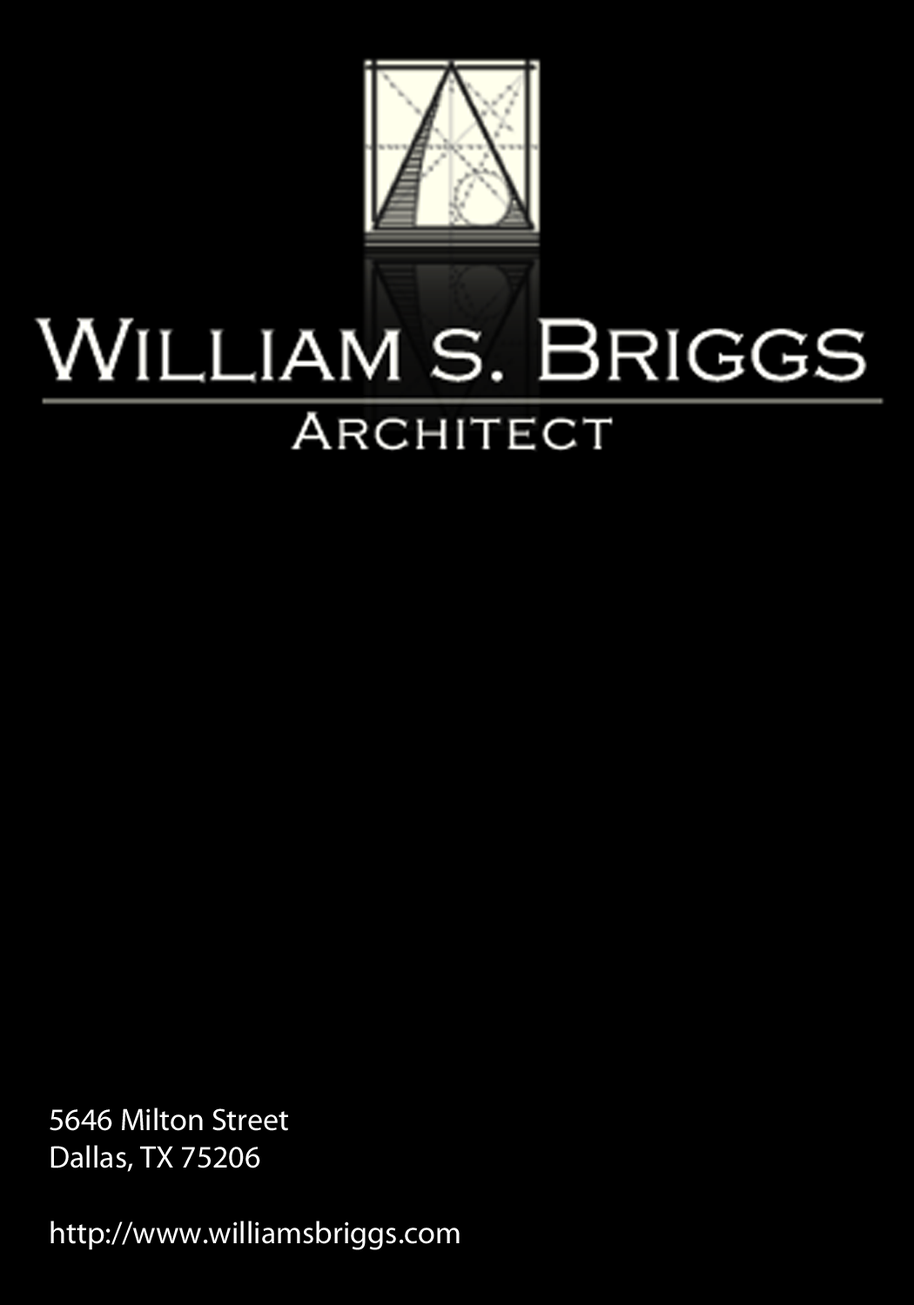
<style>
.page{position:relative;width:914px;height:1305px;background:#000000}
.page>*{position:absolute;margin:0}
.t1{font:31.3px "MyriadPro-Regular";color:#ffffff}
</style>
<div class="page">
<p class="t1" style="left:50px;top:1108px;width:409px;height:142px">5646 Milton Street<br>Dallas, TX 75206<br><br>http://www.williamsbriggs.com</p>
</div>
